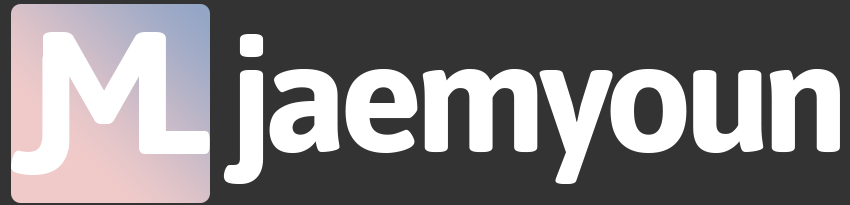
<style>
.page{position:relative;width:850px;height:205px;background:#333333}
.page>*{position:absolute;margin:0}
.t1{font:200px "Jaldi-Bold";color:#ffffff}
.t2{font:180px "Jaldi-Bold";letter-spacing:-0.05em;color:#ffffff}
</style>
<div class="page">
<p class="t1" style="left:43px;top:32px;width:123px;height:121px">M</p>
<p class="t1" style="left:139px;top:33px;width:71px;height:121px">L</p>
<p class="t2" style="left:223px;top:34px;width:617px;height:150px">jaemyoun</p>
<p class="t1" style="left:11px;top:53px;width:59px;height:122px">J</p>
</div>
